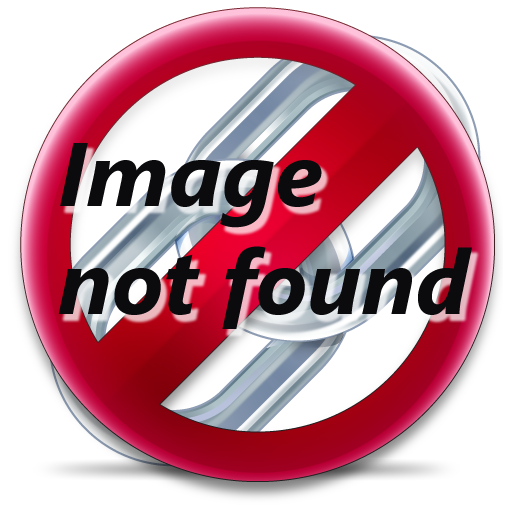
<style>
.page{position:relative;width:512px;height:512px;background:#ffffff}
.page>*{position:absolute;margin:0}
.t1{font:90px "SegoeUI-BoldItalic";color:#0b0b0e}
</style>
<div class="page">
<p class="t1" style="left:58px;top:143px;width:414px;height:186px">Image<br>not found</p>
</div>
